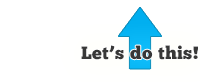
<style>
.page{position:relative;width:200px;height:82px;background:#ffffff}
.page>*{position:absolute;margin:0}
.t1{font:18px "ChunkFive-Roman";letter-spacing:0.025em;color:#383838}
</style>
<div class="page">
<p class="t1" style="left:81px;top:45px;width:117px;height:15px">Let’s do this!</p>
</div>
